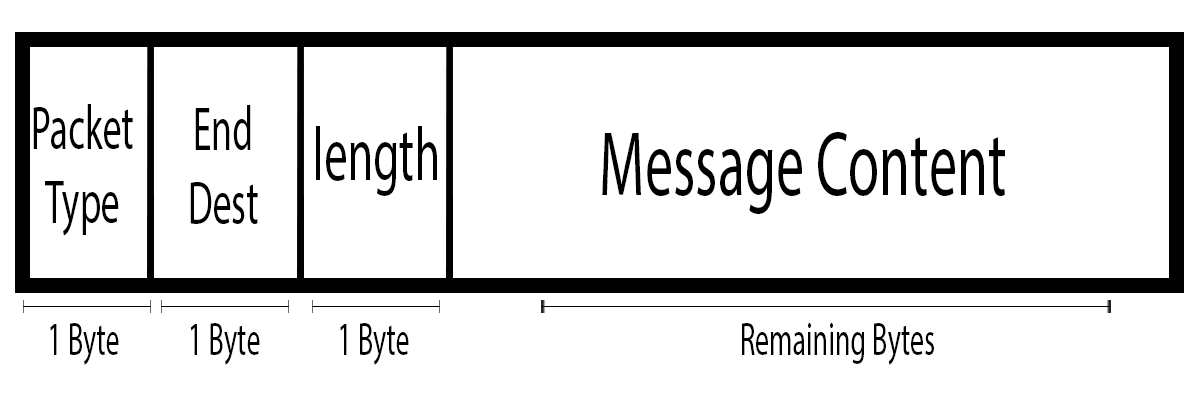
<style>
.page{position:relative;width:1200px;height:400px;background:#ffffff}
.page>*{position:absolute;margin:0}
.t1{font:61.7px "MyriadPro-Regular";color:#000000;scale:0.61 1}
.t2{font:76.4px "MyriadPro-Regular";color:#000000;scale:0.61 1}
.t3{font:92.5px "MyriadPro-Regular";color:#000000;scale:0.61 1}
.t4{font:46.3px "MyriadPro-Regular";color:#000000;scale:0.61 1}
</style>
<div class="page">
<p class="t1" style="left:33px;top:104px;width:100px;height:132px;text-align:center">Packet<br>Type</p>
<p class="t1" style="left:190px;top:105px;width:68px;height:119px;text-align:center">End<br>Dest</p>
<p class="t2" style="left:316px;top:126px;width:121px;height:70px">length</p>
<p class="t3" style="left:602px;top:132px;width:403px;height:82px">Message Content</p>
<p class="t4" style="left:50px;top:323px;width:69px;height:42px">1 Byte</p>
<p class="t4" style="left:190px;top:323px;width:70px;height:42px">1 Byte</p>
<p class="t4" style="left:340px;top:323px;width:69px;height:42px">1 Byte</p>
<p class="t4" style="left:742px;top:323px;width:192px;height:42px">Remaining Bytes</p>
</div>
